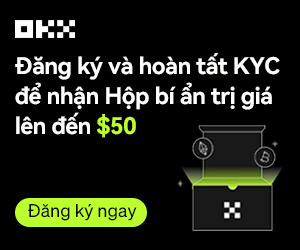
<style>
.page{position:relative;width:300px;height:250px;background:#000000}
.page>*{position:absolute;margin:0}
.t1{font:23px/30px "HarmonyOS_Sans_SC_Bold";letter-spacing:-0.025em;color:#fffffe}
.t2{font:23px/30px "HarmonyOS_Sans_SC_Bold";letter-spacing:-0.025em;color:#bcff2f}
.t3{font:18px "Sohne-Buch";color:#000000}
</style>
<div class="page">
<p class="t1" style="left:15px;top:53px;width:265px;height:85px">Đăng ký và hoàn tất KYC <br>để nhận Hộp bí ẩn trị giá <br>lên đến <span class="t2">$50</span></p>
<p class="t3" style="left:28px;top:204px;width:109px;height:17px">Đăng ký ngay</p>
</div>
